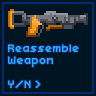
<style>
.page{position:relative;width:96px;height:96px;background:#001522}
.page>*{position:absolute;margin:0}
.t1{font:12px/12px "Hobo";color:#27abff}
</style>
<div class="page">
<p class="t1" style="left:8px;top:44px;width:71px;height:44px">Reassemble Weapon<br><br>Y/N &gt;</p>
</div>
